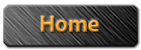
<style>
.page{position:relative;width:141px;height:50px}
.page>*{position:absolute;margin:0}
.t1{font:23.6px "MyriadPro-Bold";letter-spacing:-0.025em}
</style>
<div class="page">
<p class="t1" style="left:41px;top:16px;width:59px;height:16px">Home</p>
</div>
